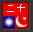
<style>
.page{position:relative;width:33px;height:32px;background:#f20000}
.page>*{position:absolute;margin:0}
.t1{font:10.4px "SimSun";color:#ffffff}
</style>
<div class="page">
<p class="t1" style="left:7px;top:4px;width:18px;height:8px">二十</p>
</div>
